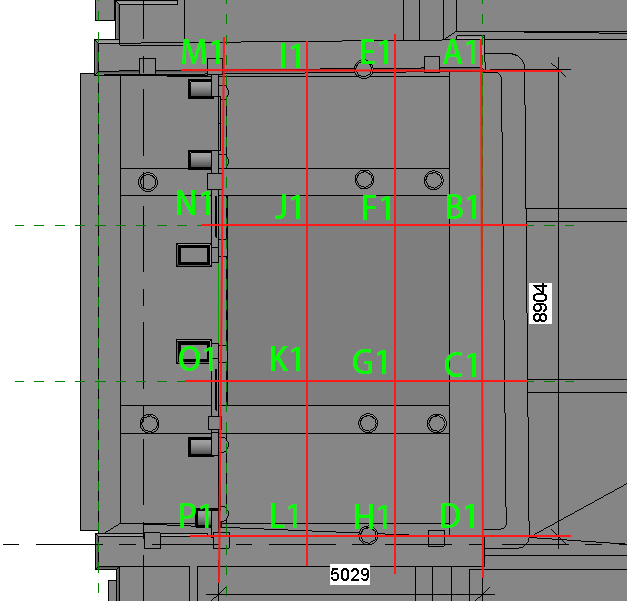
<style>
.page{position:relative;width:627px;height:601px;background:#868686}
.page>*{position:absolute;margin:0}
.t1{font:32px "AdobeFanHeitiStd-Bold";color:#06ff00}
</style>
<div class="page">
<p class="t1" style="left:182px;top:39px;width:38px;height:25px">M1</p>
<p class="t1" style="left:361px;top:39px;width:27px;height:25px">E1</p>
<p class="t1" style="left:443px;top:39px;width:32px;height:25px">A1</p>
<p class="t1" style="left:281px;top:43px;width:19px;height:25px">I1</p>
<p class="t1" style="left:177px;top:190px;width:33px;height:25px">N1</p>
<p class="t1" style="left:275px;top:194px;width:25px;height:25px">J1</p>
<p class="t1" style="left:363px;top:195px;width:27px;height:25px">F1</p>
<p class="t1" style="left:447px;top:194px;width:29px;height:25px">B1</p>
<p class="t1" style="left:179px;top:346px;width:34px;height:25px">O1</p>
<p class="t1" style="left:271px;top:346px;width:29px;height:25px">K1</p>
<p class="t1" style="left:353px;top:349px;width:33px;height:25px">G1</p>
<p class="t1" style="left:445px;top:352px;width:31px;height:25px">C1</p>
<p class="t1" style="left:180px;top:503px;width:29px;height:25px">P1</p>
<p class="t1" style="left:271px;top:503px;width:26px;height:25px">L1</p>
<p class="t1" style="left:355px;top:504px;width:32px;height:25px">H1</p>
<p class="t1" style="left:441px;top:503px;width:33px;height:25px">D1</p>
</div>
